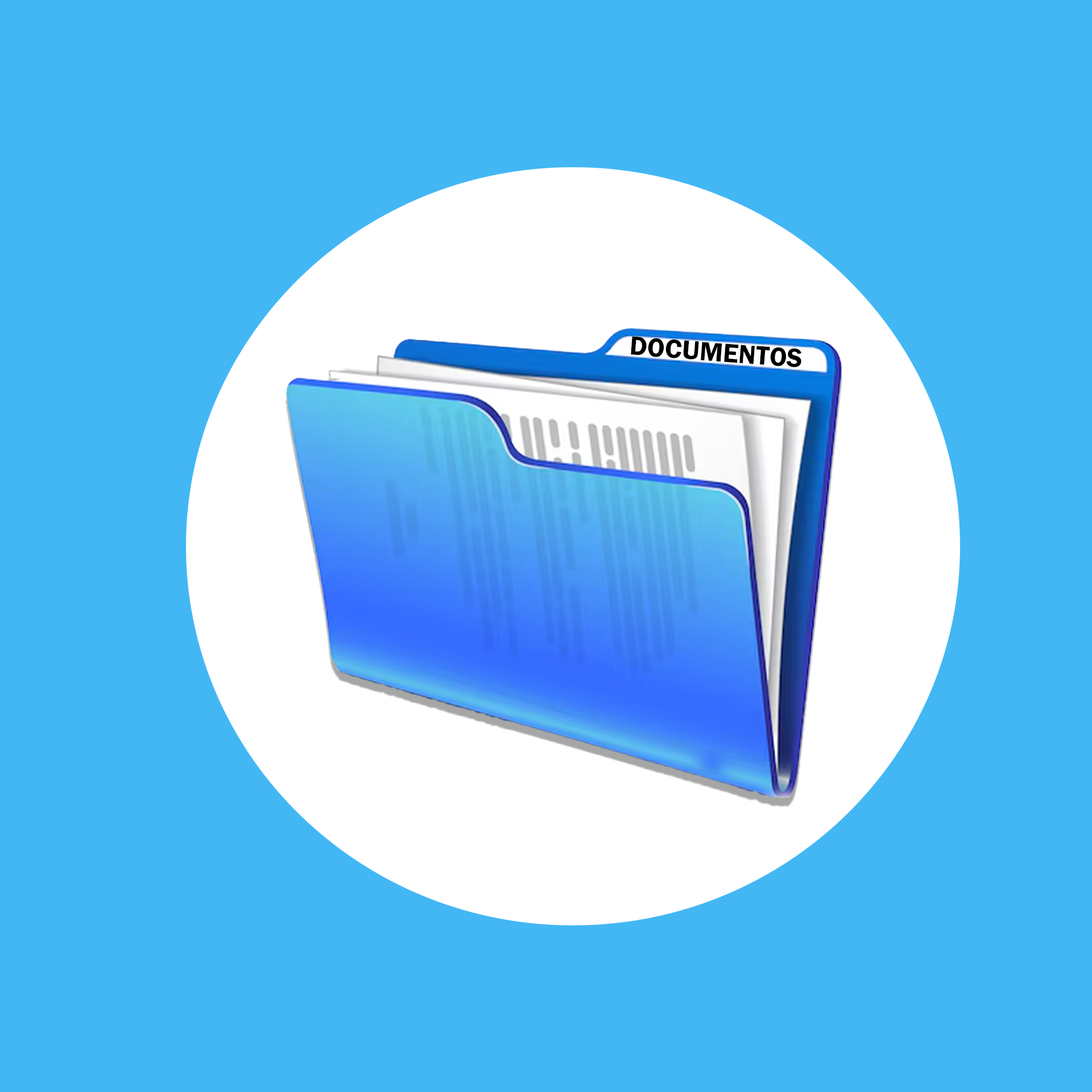
<style>
.page{position:relative;width:1092px;height:1092px;background:#42b7f4}
.page>*{position:absolute;margin:0}
.t1{font:27.3px "FranklinGothic-Demi";color:#000000}
</style>
<div class="page">
<p class="t1" style="left:631px;top:336px;width:170px;height:31px;rotate:4deg">DOCUMENTOS</p>
</div>
